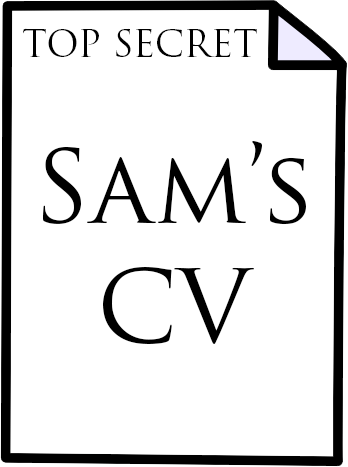
<style>
.page{position:relative;width:348px;height:467px;background:#ffffff}
.page>*{position:absolute;margin:0}
.t1{font:36px "TrajanPro-Regular";color:#000000}
.t2{font:100px "TrajanPro-Regular";color:#000000}
</style>
<div class="page">
<p class="t1" style="left:23px;top:28px;width:234px;height:29px">TOP SECRET</p>
<p class="t2" style="left:43px;top:141px;width:263px;height:203px;text-align:center">Sam’s<br>CV</p>
</div>
